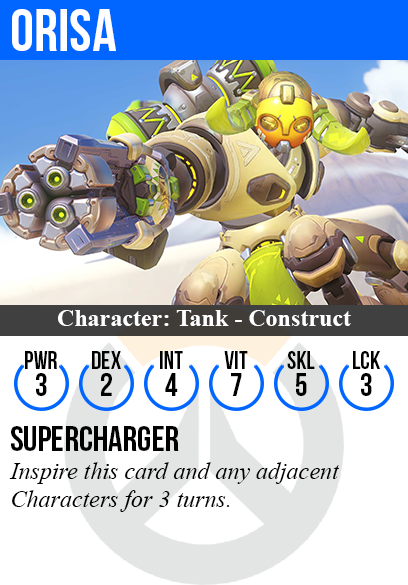
<style>
.page{position:relative;width:408px;height:585px;background:#ffffff}
.page>*{position:absolute;margin:0}
.t1{font:60px "BebasNeue";color:#ffffff}
.t2{font:24px "TimesNewRomanPS-BoldMT";color:#ffffff}
.t3{font:25px "BebasNeue";color:#000000}
.t4{font:32px "BebasNeue";color:#000000}
.t5{font:36px "BebasNeue";color:#000000}
.t6{font:24px "TimesNewRomanPS-ItalicMT";color:#000000}
</style>
<div class="page">
<p class="t1" style="left:12px;top:9px;width:104px;height:42px">orisa</p>
<p class="t2" style="left:58px;top:310px;width:293px;height:16px">Character: Tank - Construct</p>
<p class="t3" style="left:25px;top:351px;width:32px;height:18px">PWR</p>
<p class="t3" style="left:92px;top:351px;width:29px;height:18px">dex</p>
<p class="t3" style="left:160px;top:351px;width:23px;height:18px">int</p>
<p class="t3" style="left:224px;top:351px;width:24px;height:18px">vit</p>
<p class="t3" style="left:287px;top:351px;width:28px;height:18px">skl</p>
<p class="t3" style="left:353px;top:351px;width:27px;height:18px">lck</p>
<p class="t4" style="left:36px;top:373px;width:11px;height:23px">3</p>
<p class="t4" style="left:101px;top:373px;width:11px;height:23px">2</p>
<p class="t4" style="left:165px;top:373px;width:13px;height:23px">4</p>
<p class="t4" style="left:231px;top:373px;width:11px;height:23px">7</p>
<p class="t4" style="left:296px;top:373px;width:11px;height:23px">5</p>
<p class="t4" style="left:361px;top:373px;width:11px;height:23px">3</p>
<p class="t5" style="left:11px;top:426px;width:168px;height:25px">supercharger</p>
<p class="t6" style="left:9px;top:462px;width:330px;height:50px">Inspire this card and any adjacent<br>Characters for 3 turns.</p>
</div>
